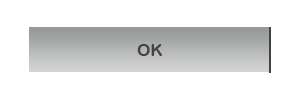
<style>
.page{position:relative;width:300px;height:100px;background:#ffffff}
.page>*{position:absolute;margin:0}
.t1{font:16.7px "ArialRoundedMTBold";color:#424242}
</style>
<div class="page">
<p class="t1" style="left:137px;top:44px;width:25px;height:12px">OK</p>
</div>
